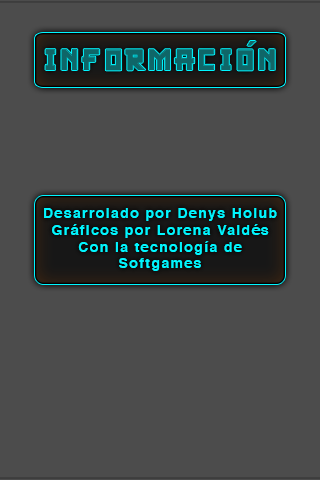
<style>
.page{position:relative;width:320px;height:480px;background:#4c4c4c}
.page>*{position:absolute;margin:0}
.t1{font:14px "Helvetica-Bold";letter-spacing:0.1em;color:#00f6ff}
</style>
<div class="page">
<p class="t1" style="left:44px;top:208px;width:233px;height:63px;text-align:center">Desarrolado por Denys Holub<br>Gráficos por Lorena Valdés<br>Con la tecnología de<br>Softgames</p>
</div>
